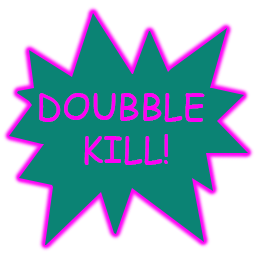
<style>
.page{position:relative;width:256px;height:256px;background:#0b8374}
.page>*{position:absolute;margin:0}
.t1{font:36px "ComicSansMS";color:#fe00f5}
</style>
<div class="page">
<p class="t1" style="left:39px;top:93px;width:166px;height:72px;text-align:center">DOUBBLE <br>KILL!</p>
</div>
